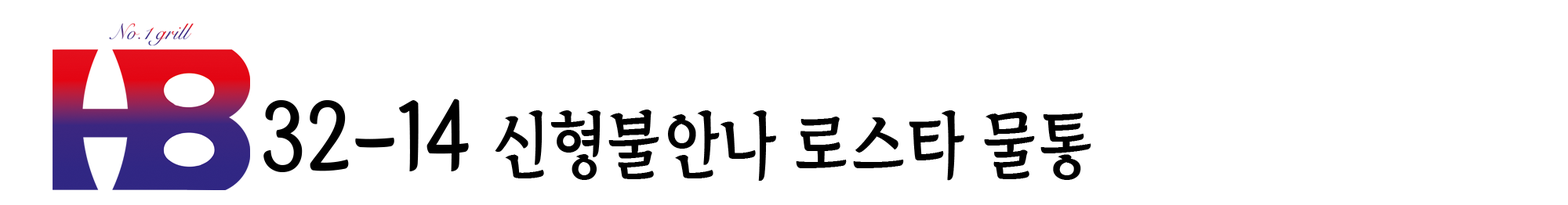
<style>
.page{position:relative;width:1568px;height:205px;background:#ffffff}
.page>*{position:absolute;margin:0}
.t1{font:73.2px "TheIndependenceHallofKorea-Regular";color:#000000;scale:0.89 1}
.t2{font:93.7px "TheIndependenceHallofKorea-Regular";color:#000000;scale:0.89 1}
</style>
<div class="page">
<p class="t1" style="left:263px;top:99px;width:828px;height:82px"><span class="t2">32-14 </span>신형불안나 로스타 물통</p>
</div>
